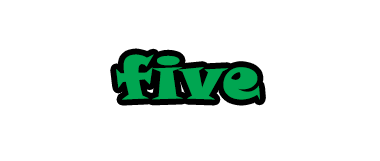
<style>
.page{position:relative;width:380px;height:161px;background:#ffffff}
.page>*{position:absolute;margin:0}
.t1{font:60px "SnapITC-Regular";color:#00a651}
</style>
<div class="page">
<p class="t1" style="left:116px;top:54px;width:144px;height:46px">five</p>
</div>
